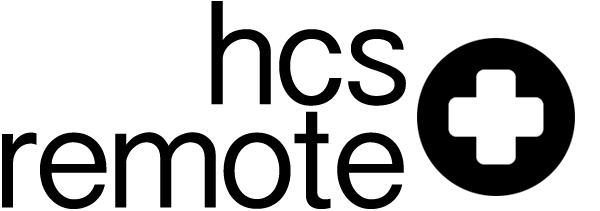
<style>
.page{position:relative;width:600px;height:211px;background:#ffffff}
.page>*{position:absolute;margin:0}
.t1{font:148px "GurmukhiSangamMN";letter-spacing:-0.04em;color:#000000}
</style>
<div class="page">
<p class="t1" style="left:211px;top:1px;width:195px;height:105px">hcs</p>
<p class="t1" style="left:2px;top:111px;width:402px;height:98px">remote</p>
</div>
